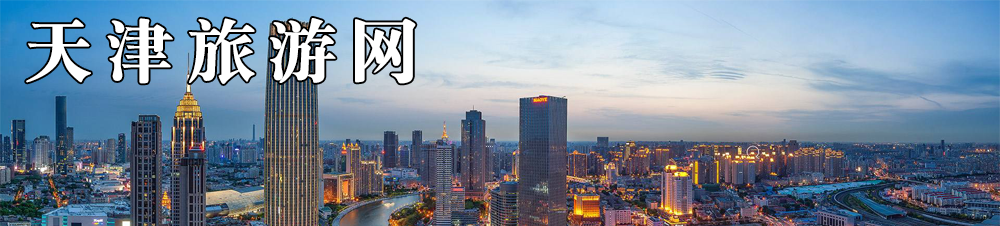
<style>
.page{position:relative;width:1000px;height:226px}
.page>*{position:absolute;margin:0}
.t1{font:70px "DFSong-XB-80-Win-GB";letter-spacing:0.16em;color:#ffffff}
</style>
<div class="page">
<p class="t1" style="left:26px;top:18px;width:390px;height:66px">天津旅游网</p>
</div>
